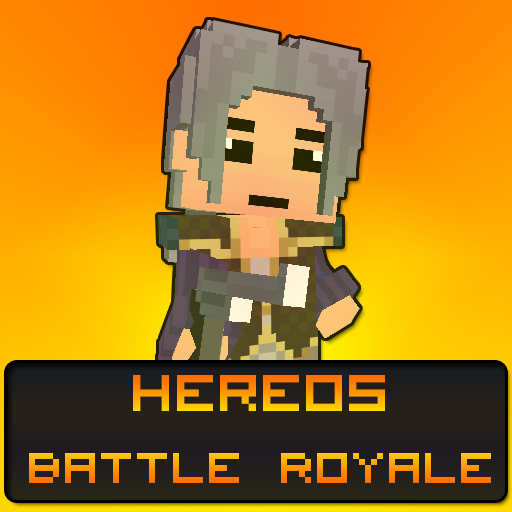
<style>
.page{position:relative;width:512px;height:512px}
.page>*{position:absolute;margin:0}
.t1{font:60px "VisitorTT1BRK"}
.t2{font:72px "VisitorTT1BRK"}
</style>
<div class="page">
<p class="t1" style="left:29px;top:375px;width:462px;height:108px;text-align:center"><span class="t2">Hereos<br></span>Battle Royale</p>
</div>
